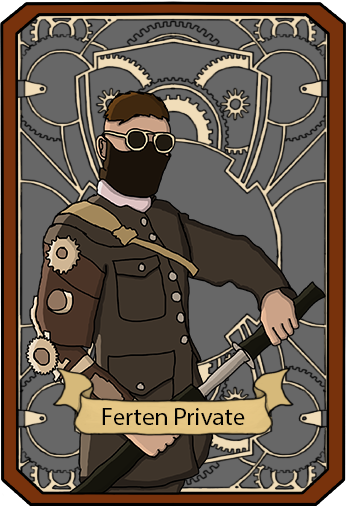
<style>
.page{position:relative;width:346px;height:507px;background:#676767}
.page>*{position:absolute;margin:0}
.t1{font:25px "MyriadPro-Regular";color:#000000}
</style>
<div class="page">
<p class="t1" style="left:102px;top:408px;width:143px;height:17px">Ferten Private</p>
</div>
